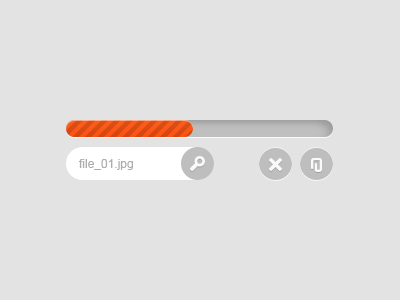
<style>
.page{position:relative;width:400px;height:300px;background:#e3e3e3}
.page>*{position:absolute;margin:0}
.t1{font:12px "ArialMT";color:#adadad}
</style>
<div class="page">
<p class="t1" style="left:79px;top:159px;width:54px;height:11px">file_01.jpg</p>
</div>
